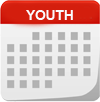
<style>
.page{position:relative;width:100px;height:102px}
.page>*{position:absolute;margin:0}
.t1{font:13.5px "Arial-BoldMT";color:#fafafc}
</style>
<div class="page">
<p class="t1" style="left:26px;top:10px;width:47px;height:10px">YOUTH</p>
</div>
